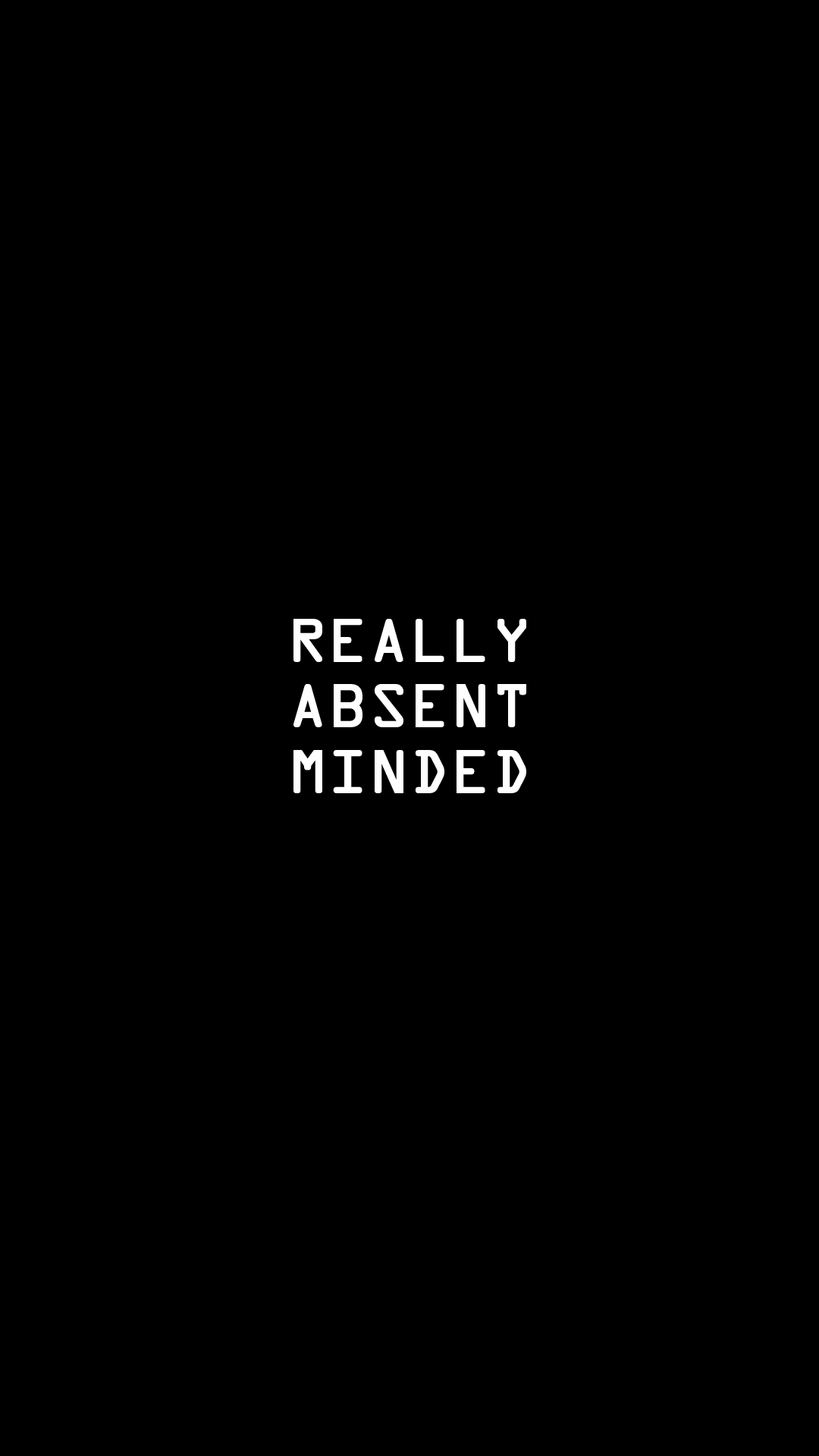
<style>
.page{position:relative;width:819px;height:1456px;background:#000000}
.page>*{position:absolute;margin:0}
.t1{font:54.6px "OCRAStd";color:#ffffff;font-weight:bold}
</style>
<div class="page">
<p class="t1" style="left:293px;top:619px;width:233px;height:174px;text-align:center">REALLY<br>ABSENT<br>MINDED</p>
</div>
